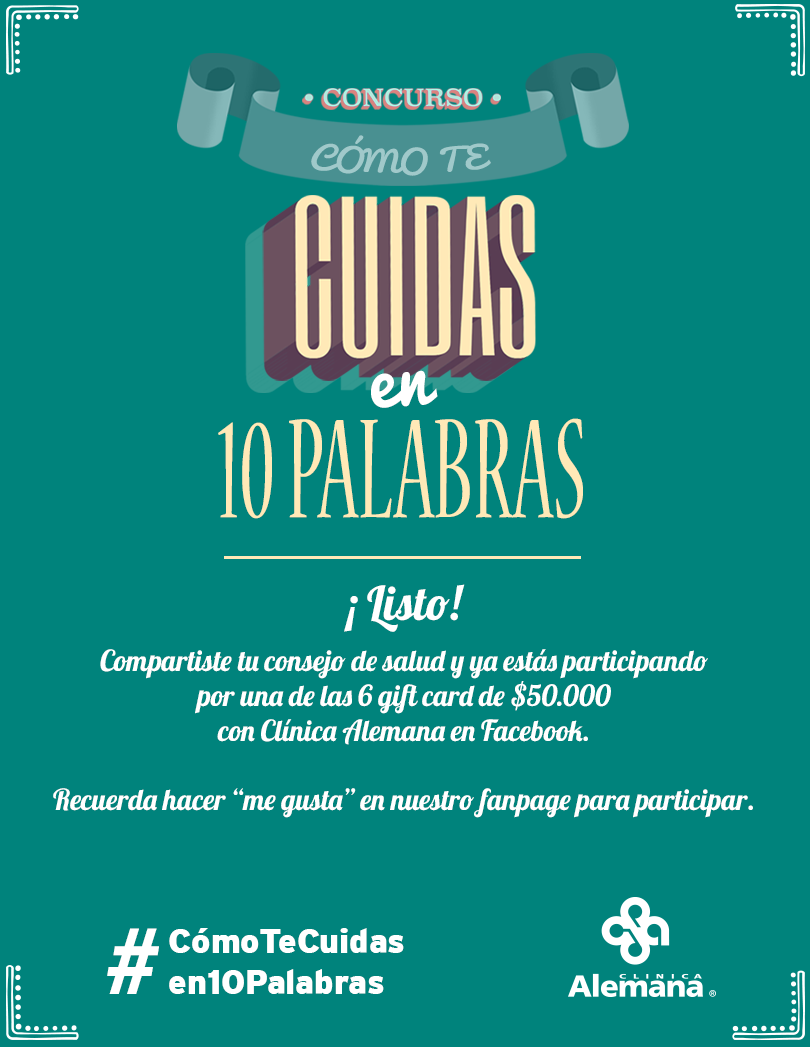
<style>
.page{position:relative;width:810px;height:1047px;background:#00837c}
.page>*{position:absolute;margin:0}
.t1{font:28.6px "Pacifico-Regular";color:#a0c9ca;text-transform:uppercase;scale:1.17 1}
.t2{font:72.9px "Pacifico-Regular";letter-spacing:-0.002em;color:#ffffff}
.t3{font:157.5px "NuevaStd-Cond";letter-spacing:-0.002em;color:#ffe9b7;scale:0.6 1}
.t4{font:28.9px "Lobster-Regular";letter-spacing:-0.002em;color:#ffffff}
.t5{font:46.9px "Lobster-Regular";letter-spacing:-0.002em;color:#ffffff}
.t6{font:100.7px "MyriadPro-BoldIt";color:#ffffff}
.t7{font:33.9px "Interstate-Black";color:#ffffff}
</style>
<div class="page">
<p class="t1" style="left:311px;top:135px;width:180px;height:41px">cómo te</p>
<p class="t1" style="left:311px;top:135px;width:180px;height:41px">cómo te</p>
<p class="t2" style="left:371px;top:370px;width:67px;height:38px;rotate:-4deg">en</p>
<p class="t2" style="left:371px;top:370px;width:67px;height:38px;rotate:-4deg">en</p>
<p class="t3" style="left:218px;top:418px;width:365px;height:101px">10 PALABRAS</p>
<p class="t3" style="left:218px;top:418px;width:365px;height:101px">10 PALABRAS</p>
<p class="t4" style="left:53px;top:584px;width:700px;height:234px;text-align:center"><span class="t5">¡ Listo!<br></span>Compartiste tu consejo de salud y ya estás participando<br>por una de las 6 gift card de $50.000<br>con Clínica Alemana en Facebook.<br><br>Recuerda hacer “me gusta” en nuestro fanpage para participar.</p>
<p class="t6" style="left:107px;top:928px;width:52px;height:66px">#</p>
<p class="t7" style="left:169px;top:928px;width:235px;height:66px">CómoTeCuidas<br>en10Palabras</p>
</div>
